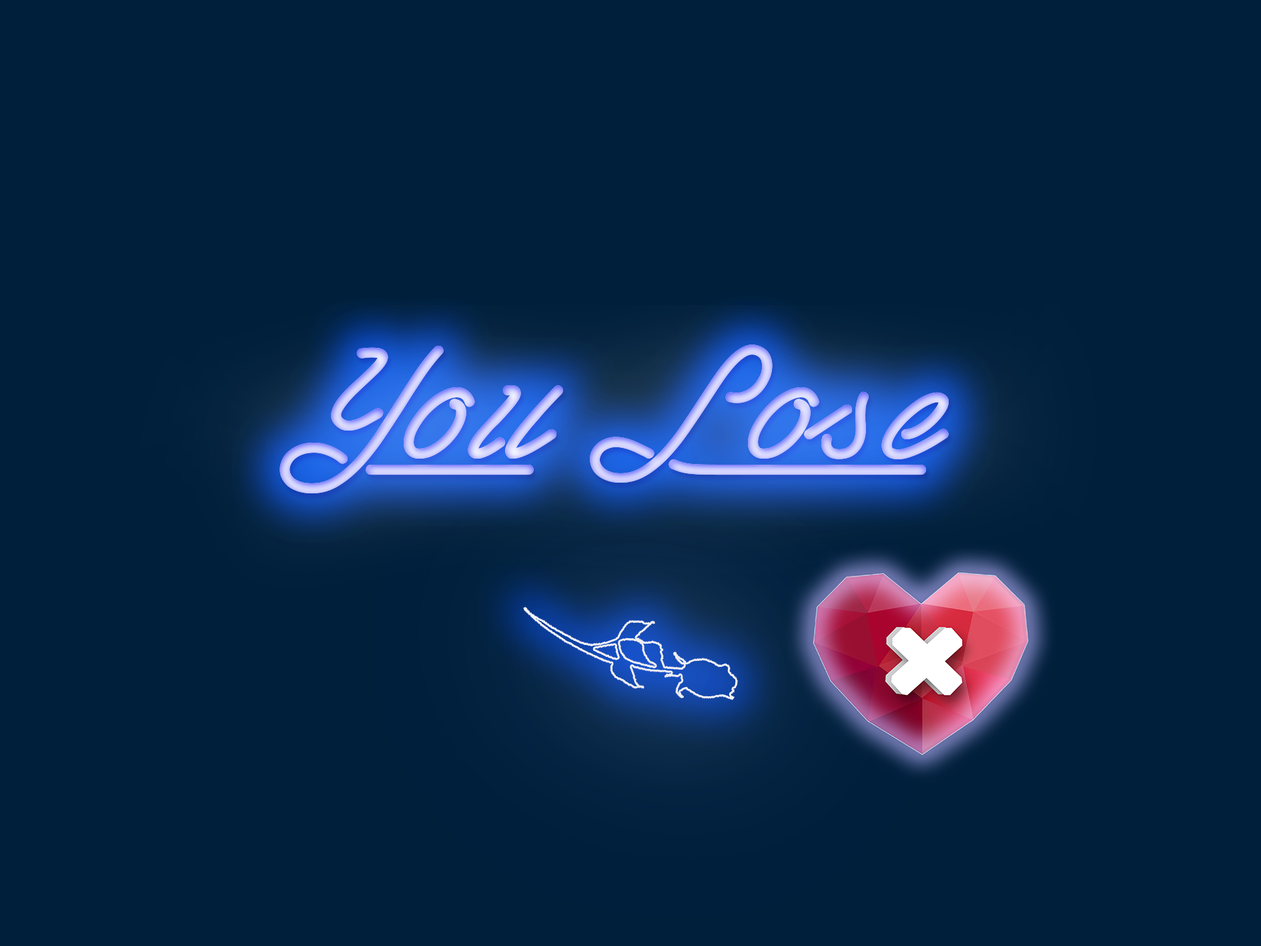
<style>
.page{position:relative;width:1261px;height:946px;background:#001f3b}
.page>*{position:absolute;margin:0}
.t1{font:191.4px "LasEnterPersonalUseOnly"}
</style>
<div class="page">
<p class="t1" style="left:280px;top:344px;width:669px;height:149px">You Lose</p>
</div>
